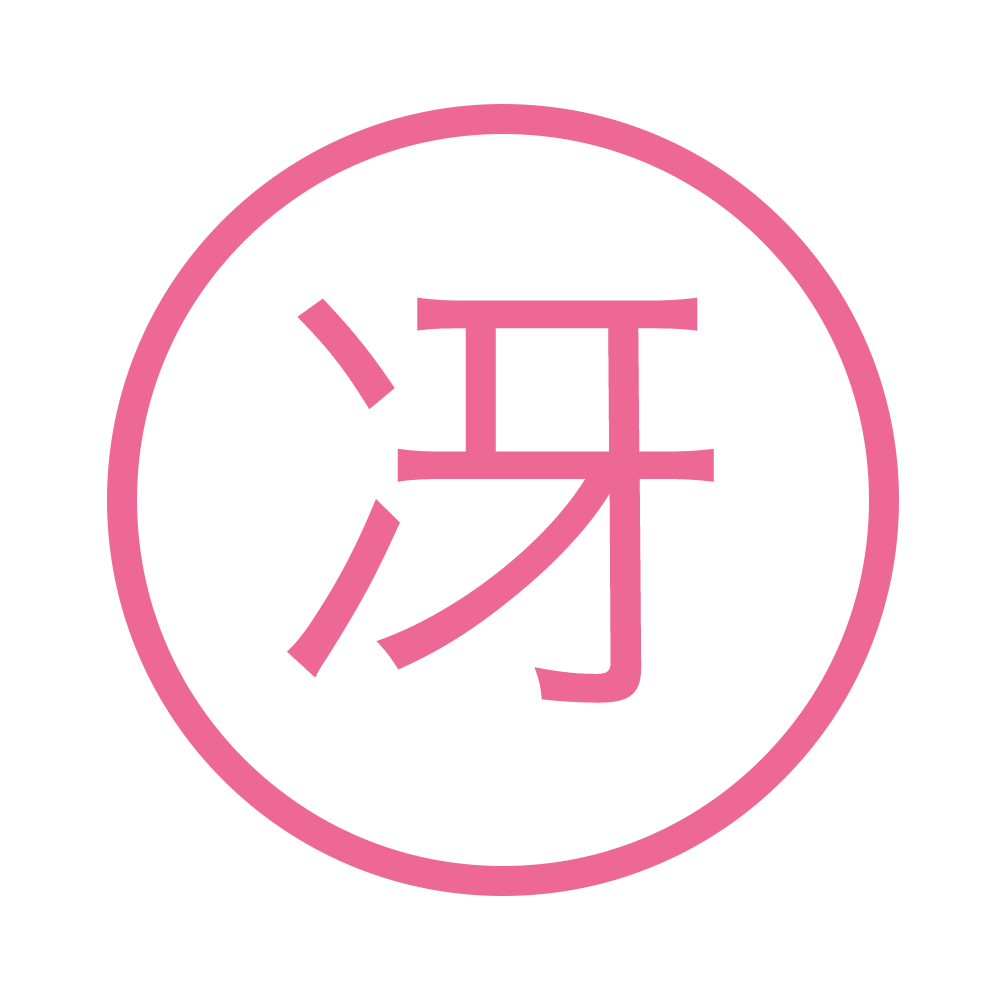
<style>
.page{position:relative;width:1000px;height:1000px;background:#ffffff}
.page>*{position:absolute;margin:0}
.t1{font:475px "HiraKakuPro-W3";color:#ed6895;text-transform:uppercase}
</style>
<div class="page">
<p class="t1" style="left:287px;top:297px;width:427px;height:406px">冴</p>
</div>
